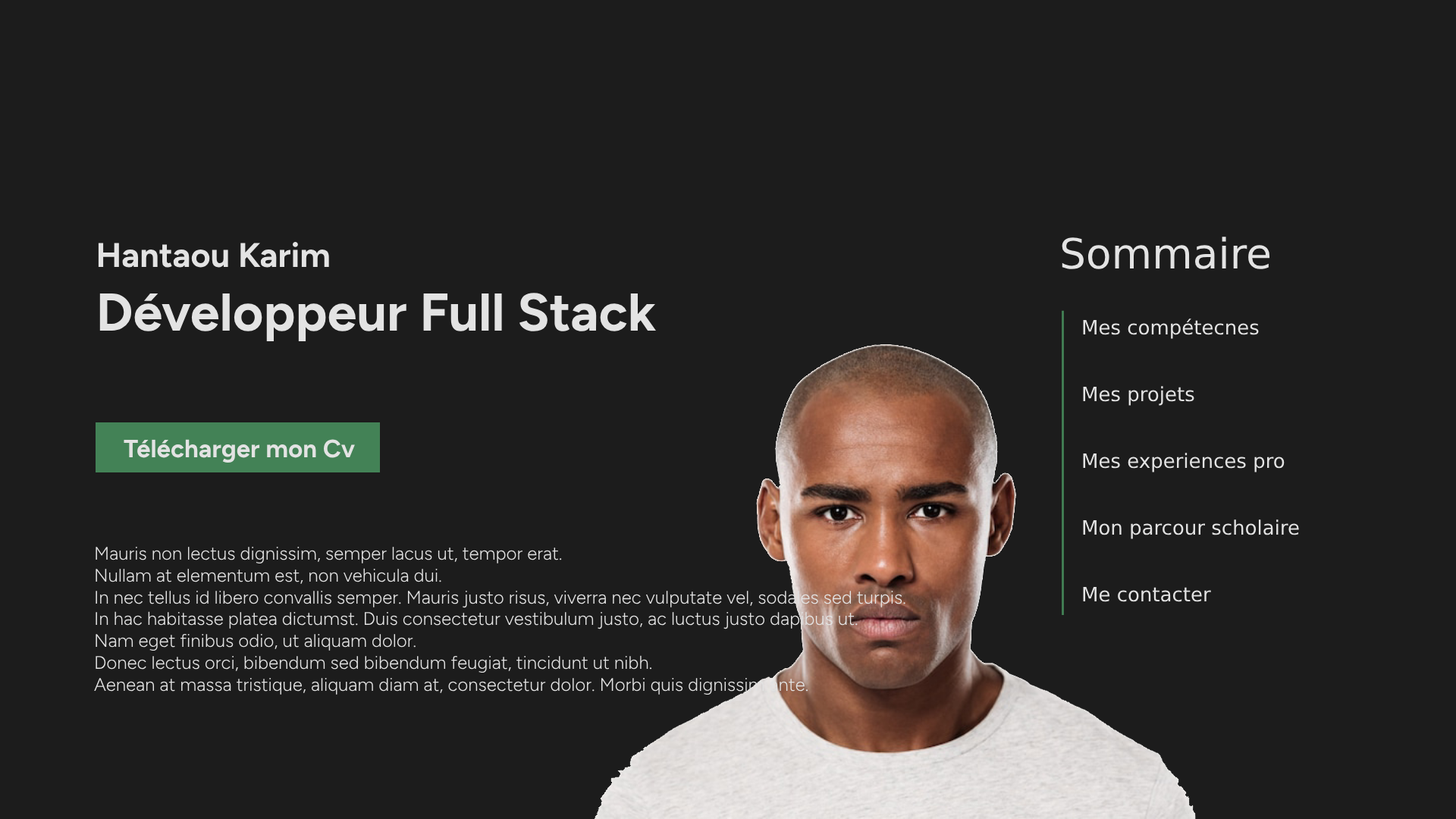
<style>
.page{position:relative;width:1456px;height:819px;background:#1c1c1c}
.page>*{position:absolute;margin:0}
.t1{font:53.1px "Figtree-Bold";color:#e3e3e3}
.t2{font:34.1px "Figtree-Bold";color:#e3e3e3}
.t3{font:41.7px "DejaVuSans";color:#e3e3e3}
.t4{font:19.7px/66.7px "DejaVuSans";color:#e3e3e3}
.t5{font:18.2px "Figtree-Light";color:#e3e3e3}
</style>
<div class="page">
<p class="t1" style="left:98px;top:242px;width:558px;height:99px"><span class="t2">Hantaou Karim<br></span>Développeur Full Stack</p>
<p class="t3" style="left:1062px;top:237px;width:208px;height:32px">Sommaire</p>
<p class="t4" style="left:1083px;top:318px;width:216px;height:284px">Mes compétecnes<br>Mes projets<br>Mes experiences pro<br>Mon parcour scholaire<br>Me contacter</p>
<p class="t5" style="left:94px;top:546px;width:811px;height:149px">Mauris non lectus dignissim, semper lacus ut, tempor erat. <br>Nullam at elementum est, non vehicula dui. <br>In nec tellus id libero convallis semper. Mauris justo risus, viverra nec vulputate vel, sodales sed turpis. <br>In hac habitasse platea dictumst. Duis consectetur vestibulum justo, ac luctus justo dapibus ut. <br>Nam eget finibus odio, ut aliquam dolor. <br>Donec lectus orci, bibendum sed bibendum feugiat, tincidunt ut nibh. <br>Aenean at massa tristique, aliquam diam at, consectetur dolor. Morbi quis dignissim ante.</p>
</div>
